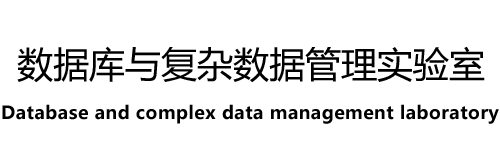
<style>
.page{position:relative;width:500px;height:150px;background:#ffffff}
.page>*{position:absolute;margin:0}
.t1{font:36px "MicrosoftYaHei";color:#000000}
.t2{font:18px "MicrosoftYaHei-Bold";letter-spacing:0.025em;color:#000000}
</style>
<div class="page">
<p class="t1" style="left:17px;top:46px;width:468px;height:37px">数据库与复杂数据管理实验室</p>
<p class="t2" style="left:2px;top:104px;width:497px;height:20px">Database and complex data management laboratory</p>
</div>
